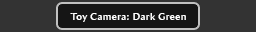
<style>
.page{position:relative;width:256px;height:32px;background:#333333}
.page>*{position:absolute;margin:0}
.t1{font:10px "AmiraParadiso";letter-spacing:0.05em;color:#ffffff}
</style>
<div class="page">
<p class="t1" style="left:70px;top:13px;width:116px;height:9px">Toy Camera: Dark Green</p>
</div>
